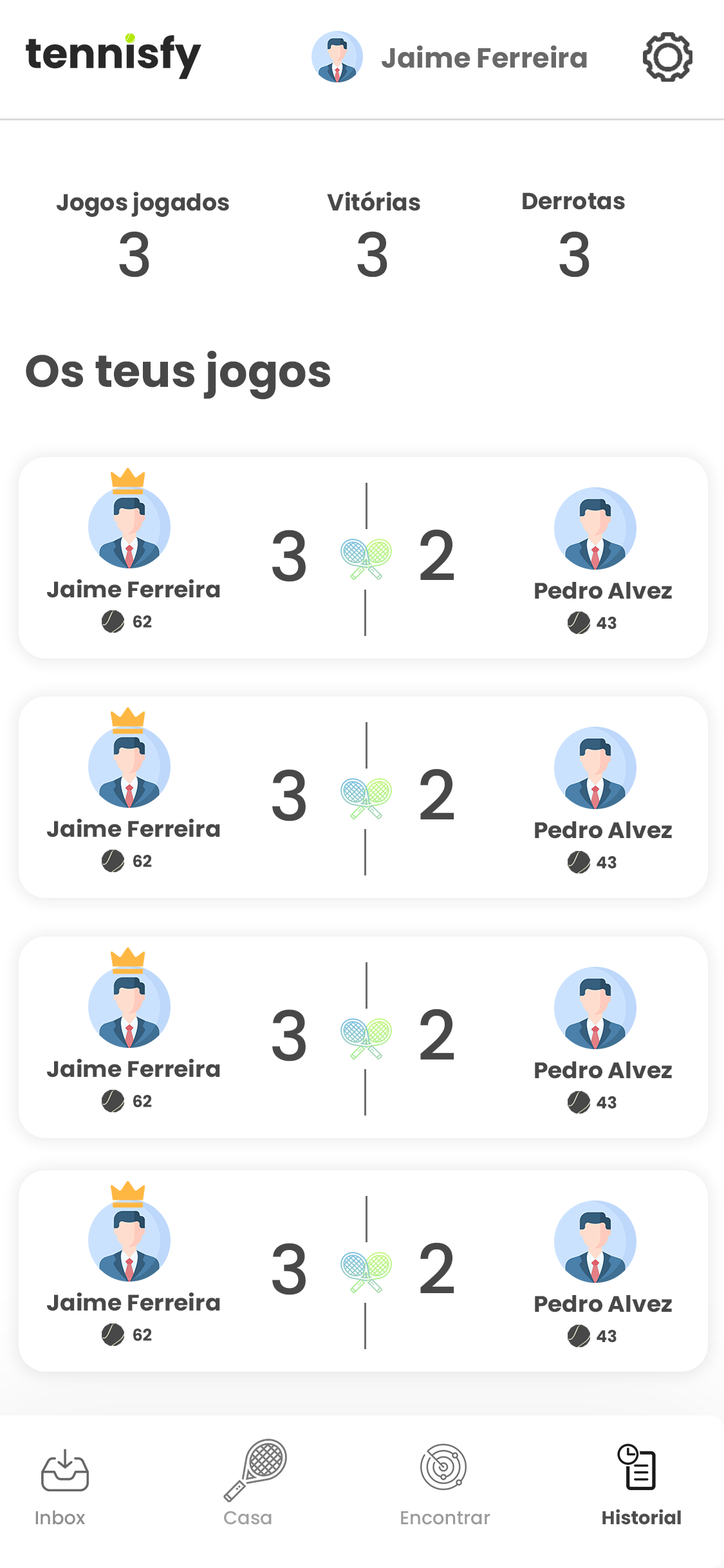
<style>
.page{position:relative;width:724px;height:1568px;background:#ffffff}
.page>*{position:absolute;margin:0}
.t1{font:27.7px "Poppins-Bold";color:#696969}
.t2{font:23.3px "Poppins-Bold";color:#484848}
.t3{font:60.6px "Poppins-Medium";color:#484848}
.t4{font:45.1px "Poppins-Bold";color:#484848}
.t5{font:68.6px "Poppins-Medium";color:#484848}
.t6{font:22.5px "Poppins-Bold";color:#484848;scale:1.04 1}
.t7{font:16.4px "Poppins-Bold";color:#484848}
.t8{font:18.7px "Poppins-Medium";color:#8d8d8d}
.t9{font:18.7px "Poppins-Medium";color:#a1a1a1}
.t10{font:18.7px "Poppins-Medium";color:#9a9a9a}
.t11{font:18.7px "Poppins-Bold";color:#4e4e4e}
</style>
<div class="page">
<p class="t1" style="left:382px;top:45px;width:205px;height:23px">Jaime Ferreira</p>
<p class="t2" style="left:57px;top:192px;width:172px;height:25px">Jogos jogados</p>
<p class="t2" style="left:327px;top:191px;width:93px;height:20px">Vitórias</p>
<p class="t2" style="left:523px;top:192px;width:102px;height:18px">Derrotas</p>
<p class="t3" style="left:119px;top:231px;width:30px;height:46px">3</p>
<p class="t3" style="left:357px;top:231px;width:30px;height:46px">3</p>
<p class="t3" style="left:559px;top:231px;width:31px;height:46px">3</p>
<p class="t4" style="left:26px;top:351px;width:304px;height:49px">Os teus jogos</p>
<p class="t5" style="left:272px;top:530px;width:34px;height:52px">3</p>
<p class="t5" style="left:420px;top:529px;width:34px;height:51px">2</p>
<p class="t6" style="left:47px;top:579px;width:173px;height:19px">Jaime Ferreira</p>
<p class="t6" style="left:535px;top:582px;width:137px;height:17px">Pedro Alvez</p>
<p class="t7" style="left:133px;top:615px;width:19px;height:13px">62</p>
<p class="t7" style="left:597px;top:617px;width:20px;height:13px">43</p>
<p class="t5" style="left:272px;top:769px;width:34px;height:52px">3</p>
<p class="t5" style="left:420px;top:769px;width:34px;height:50px">2</p>
<p class="t6" style="left:47px;top:819px;width:173px;height:18px">Jaime Ferreira</p>
<p class="t6" style="left:535px;top:821px;width:137px;height:18px">Pedro Alvez</p>
<p class="t7" style="left:133px;top:855px;width:19px;height:12px">62</p>
<p class="t7" style="left:597px;top:856px;width:20px;height:13px">43</p>
<p class="t5" style="left:272px;top:1009px;width:34px;height:52px">3</p>
<p class="t5" style="left:420px;top:1009px;width:34px;height:50px">2</p>
<p class="t6" style="left:47px;top:1059px;width:173px;height:19px">Jaime Ferreira</p>
<p class="t6" style="left:535px;top:1061px;width:137px;height:18px">Pedro Alvez</p>
<p class="t7" style="left:133px;top:1095px;width:19px;height:12px">62</p>
<p class="t7" style="left:597px;top:1096px;width:20px;height:13px">43</p>
<p class="t5" style="left:272px;top:1243px;width:34px;height:52px">3</p>
<p class="t5" style="left:420px;top:1242px;width:34px;height:51px">2</p>
<p class="t6" style="left:47px;top:1293px;width:173px;height:18px">Jaime Ferreira</p>
<p class="t6" style="left:535px;top:1295px;width:137px;height:17px">Pedro Alvez</p>
<p class="t7" style="left:133px;top:1329px;width:19px;height:12px">62</p>
<p class="t7" style="left:597px;top:1330px;width:20px;height:13px">43</p>
<p class="t8" style="left:35px;top:1510px;width:50px;height:15px">Inbox</p>
<p class="t9" style="left:224px;top:1511px;width:48px;height:14px">Casa</p>
<p class="t10" style="left:401px;top:1511px;width:89px;height:14px">Encontrar</p>
<p class="t11" style="left:602px;top:1509px;width:79px;height:16px">Historial</p>
</div>
